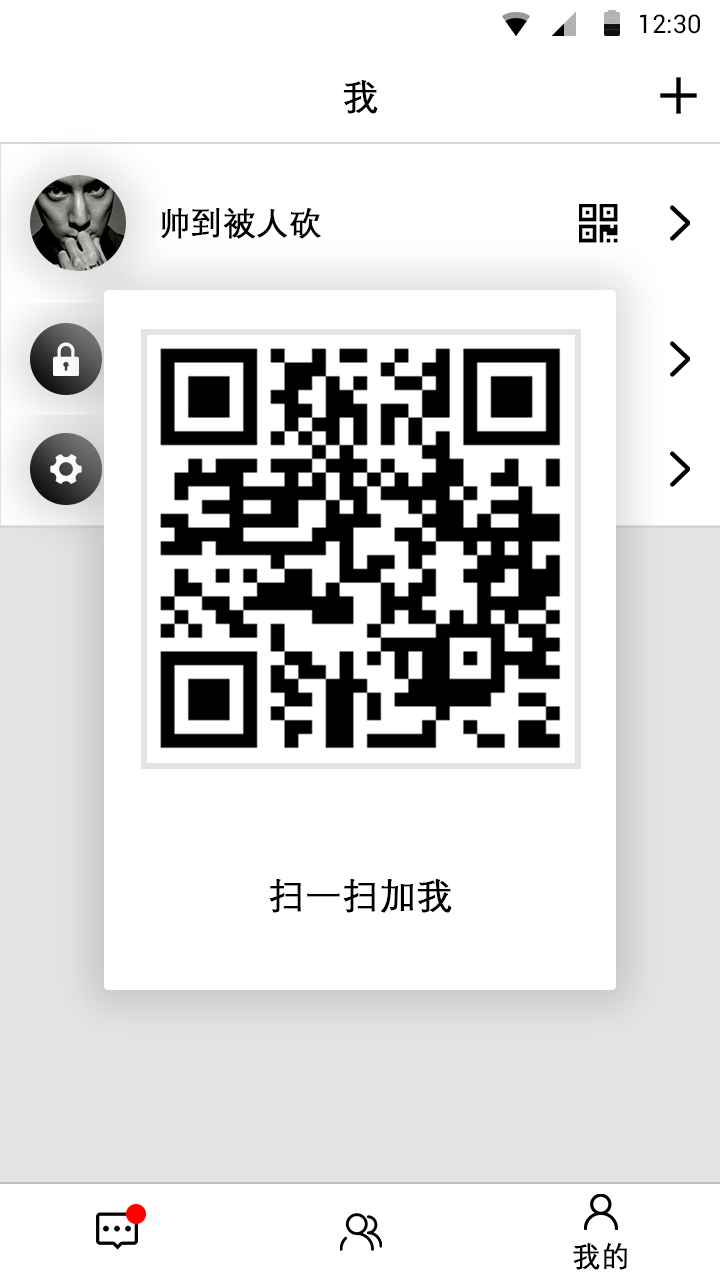
<style>
.page{position:relative;width:720px;height:1280px;background:#ffffff}
.page>*{position:absolute;margin:0}
.t1{font:25.4px "Roboto-Regular";color:#000000}
.t2{font:36px "DengXian-Regular";color:#000000;font-weight:bold}
.t3{font:32px "DengXian-Regular";color:#000000;font-weight:bold}
.t4{font:28px "DengXian-Regular";color:#000000;font-weight:bold}
</style>
<div class="page">
<p class="t1" style="left:640px;top:14px;width:60px;height:20px">12:30</p>
<p class="t2" style="left:343px;top:80px;width:35px;height:34px">我</p>
<p class="t3" style="left:161px;top:208px;width:160px;height:31px">帅到被人砍</p>
<p class="t2" style="left:269px;top:879px;width:183px;height:34px">扫一扫加我</p>
<p class="t4" style="left:573px;top:1243px;width:54px;height:27px">我的</p>
</div>
